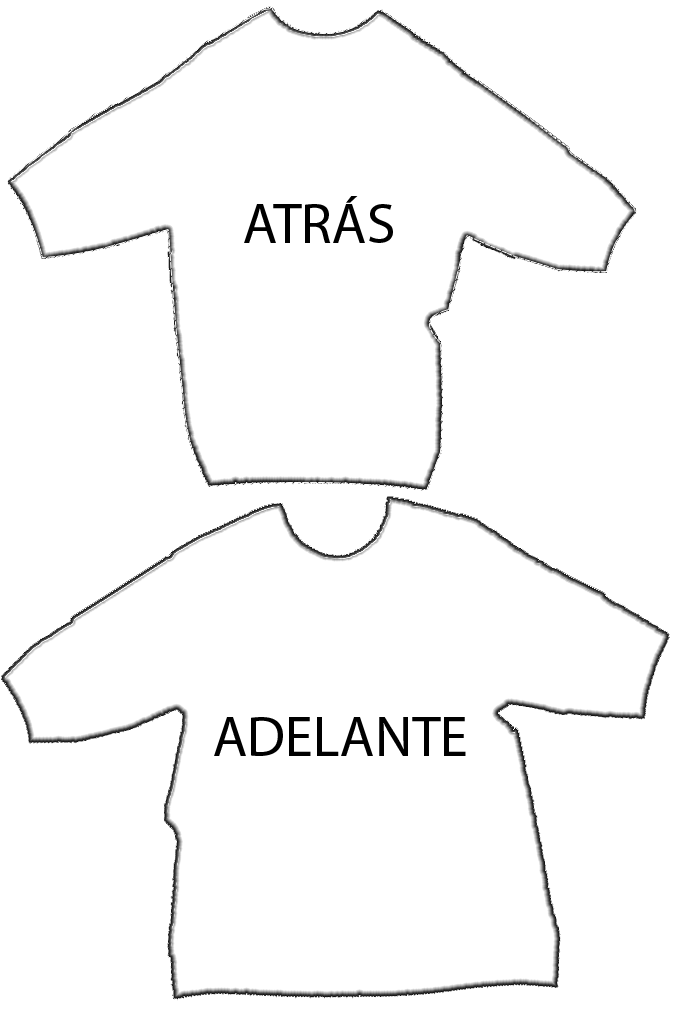
<style>
.page{position:relative;width:680px;height:1024px;background:#ffffff}
.page>*{position:absolute;margin:0}
.t1{font:56.8px "MyriadPro-Regular";color:#000000}
</style>
<div class="page">
<p class="t1" style="left:244px;top:196px;width:149px;height:47px">ATRÁS</p>
<p class="t1" style="left:214px;top:717px;width:252px;height:39px">ADELANTE</p>
</div>
